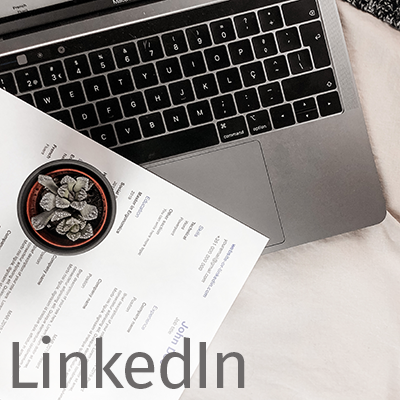
<style>
.page{position:relative;width:400px;height:400px}
.page>*{position:absolute;margin:0}
.t1{font:67.3px "FiraSans-Regular";letter-spacing:-0.04em;color:#6c6969}
</style>
<div class="page">
<p class="t1" style="left:12px;top:335px;width:233px;height:54px">LinkedIn</p>
</div>
